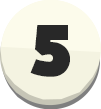
<style>
.page{position:relative;width:101px;height:109px;background:#fcfbeb}
.page>*{position:absolute;margin:0}
.t1{font:72px "MovaviGrotesqueBlack";color:#282828}
</style>
<div class="page">
<p class="t1" style="left:30px;top:25px;width:40px;height:52px">5</p>
</div>
